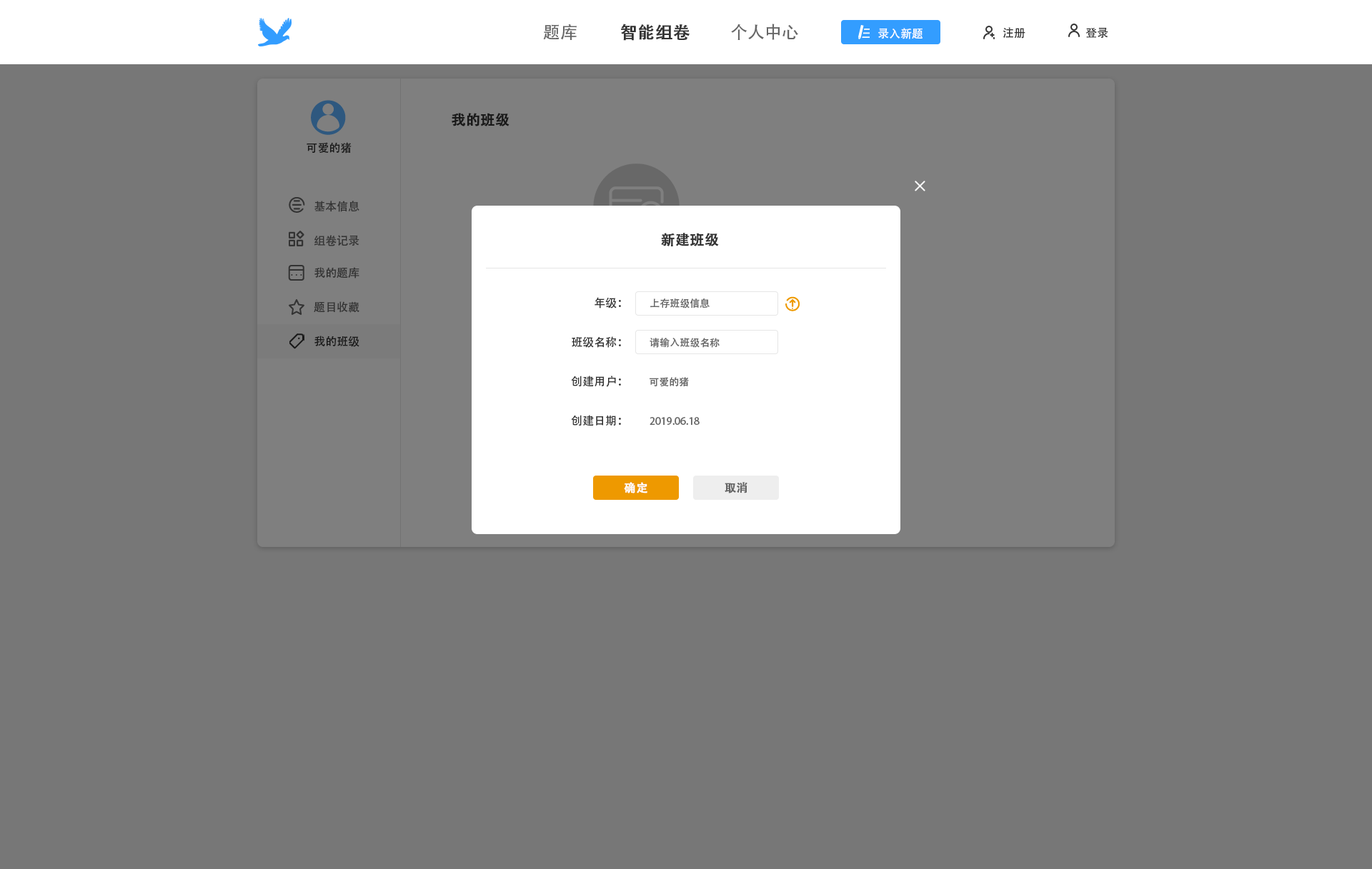
<style>
.page{position:relative;width:1372px;height:869px;background:#777777}
.page>*{position:absolute;margin:0}
.t1{font:17.1px "AdobeHeitiStd-Regular";color:#666666}
.t2{font:17.1px "AdobeHeitiStd-Regular";color:#333333;font-weight:bold}
.t3{font:11.4px "AdobeHeitiStd-Regular";color:#ffffff}
.t4{font:11.4px "AdobeHeitiStd-Regular";color:#333333}
.t5{font:14.3px "AdobeHeitiStd-Regular";color:#191919;font-weight:bold}
.t6{font:11.4px "AdobeHeitiStd-Regular";color:#191919}
.t7{font:14.3px "AdobeHeitiStd-Regular";color:#333333;font-weight:bold}
.t8{font:10px "AdobeHeitiStd-Regular";color:#666666}
.t9{font:11.4px "AdobeHeitiStd-Regular";color:#ffffff;font-weight:bold}
.t10{font:11.4px "AdobeHeitiStd-Regular";color:#666666;font-weight:bold}
</style>
<div class="page">
<p class="t1" style="left:543px;top:24px;width:33px;height:16px">题库</p>
<p class="t2" style="left:621px;top:24px;width:68px;height:17px">智能组卷</p>
<p class="t1" style="left:731px;top:24px;width:67px;height:16px">个人中心</p>
<p class="t3" style="left:878px;top:28px;width:44px;height:11px">录入新题</p>
<p class="t4" style="left:1002px;top:27px;width:23px;height:12px">注册</p>
<p class="t4" style="left:1085px;top:27px;width:23px;height:12px">登录</p>
<p class="t5" style="left:451px;top:113px;width:58px;height:13px">我的班级</p>
<p class="t6" style="left:306px;top:142px;width:45px;height:12px">可爱的猪</p>
<p class="t4" style="left:314px;top:201px;width:45px;height:11px">基本信息</p>
<p class="t7" style="left:661px;top:233px;width:58px;height:13px">新建班级</p>
<p class="t4" style="left:314px;top:235px;width:45px;height:11px">组卷记录</p>
<p class="t4" style="left:314px;top:267px;width:45px;height:12px">我的题库</p>
<p class="t4" style="left:314px;top:301px;width:45px;height:12px">题目收藏</p>
<p class="t4" style="left:594px;top:297px;width:27px;height:12px">年级：</p>
<p class="t8" style="left:650px;top:299px;width:59px;height:10px">上存班级信息</p>
<p class="t6" style="left:314px;top:336px;width:45px;height:11px">我的班级</p>
<p class="t4" style="left:571px;top:336px;width:50px;height:12px">班级名称：</p>
<p class="t8" style="left:649px;top:338px;width:70px;height:10px">请输入班级名称</p>
<p class="t4" style="left:571px;top:376px;width:50px;height:11px">创建用户：</p>
<p class="t8" style="left:649px;top:377px;width:40px;height:10px">可爱的猪</p>
<p class="t4" style="left:571px;top:415px;width:50px;height:11px">创建日期：</p>
<p class="t8" style="left:649px;top:417px;width:50px;height:8px">2019.06.18</p>
<p class="t9" style="left:624px;top:482px;width:23px;height:12px">确定</p>
<p class="t10" style="left:724px;top:482px;width:23px;height:12px">取消</p>
</div>
